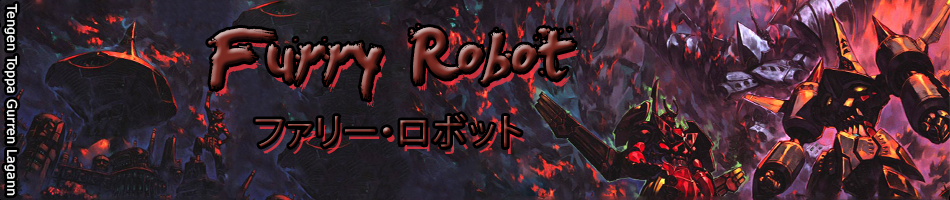
<style>
.page{position:relative;width:950px;height:200px}
.page>*{position:absolute;margin:0}
.t1{font:13px "Verdana";color:#ffffff}
.t2{font:72px "LeviBrush"}
.t3{font:36px "KozGoPr6N-Regular"}
</style>
<div class="page">
<p class="t1" style="left:4px;top:3px;width:14px;height:193px;rotate:90deg">Tengen Toppa Gurren Lagann</p>
<p class="t2" style="left:208px;top:25px;width:367px;height:75px">Furry Robot</p>
<p class="t3" style="left:255px;top:114px;width:266px;height:33px">ファリー・ロボット</p>
</div>
